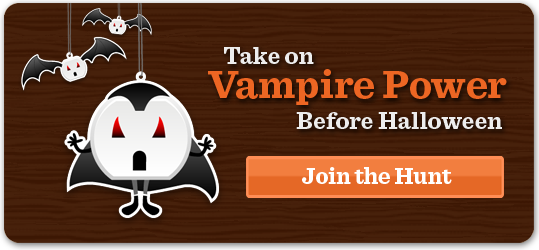
<style>
.page{position:relative;width:539px;height:250px}
.page>*{position:absolute;margin:0}
.t1{font:24.4px "Sentinel-Bold";color:#ededed}
.t2{font:41.2px "Sentinel-Bold";color:#ed6623}
.t3{font:32.6px "Sentinel-Bold";color:#ededed}
.t4{font:24px "Sentinel-Bold";letter-spacing:-0.02em;color:#ffffff}
</style>
<div class="page">
<p class="t1" style="left:224px;top:47px;width:90px;height:17px">Take on</p>
<p class="t2" style="left:208px;top:69px;width:299px;height:36px">Vampire Power</p>
<p class="t1" style="left:296px;top:112px;width:206px;height:17px"><span class="t3"> <br><br></span>Before Halloween</p>
<p class="t4" style="left:302px;top:167px;width:150px;height:17px">Join the Hunt</p>
</div>
